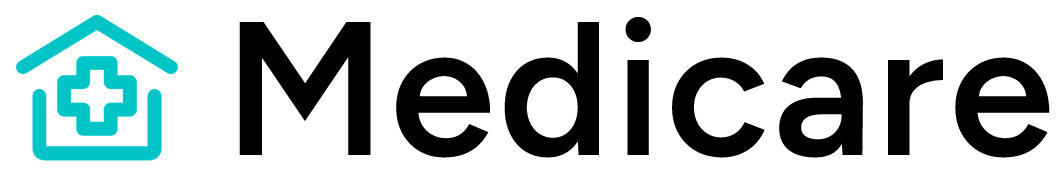
<style>
.page{position:relative;width:1064px;height:176px;background:#ffffff}
.page>*{position:absolute;margin:0}
.t1{font:190px "Figtree-SemiBold";letter-spacing:0.02em;color:#000000}
</style>
<div class="page">
<p class="t1" style="left:239px;top:17px;width:811px;height:141px">Medicare</p>
</div>
